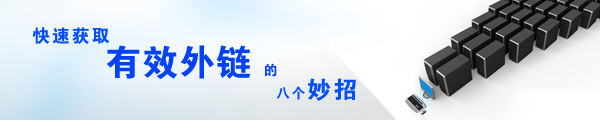
<style>
.page{position:relative;width:600px;height:120px}
.page>*{position:absolute;margin:0}
.t1{font:18px "FZDHTJW--GB1-0";letter-spacing:0.1em;color:#004eff}
.t2{font:36px "FZDHTJW--GB1-0";letter-spacing:0.025em;color:#0042ff}
.t3{font:14px "FZDHTJW--GB1-0";letter-spacing:0.025em;color:#0042ff}
.t4{font:14px "FZDHTJW--GB1-0";letter-spacing:0.1em;color:#004eff}
.t5{font:24px "FZDHTJW--GB1-0";letter-spacing:0.1em;color:#004eff}
</style>
<div class="page">
<p class="t1" style="left:32px;top:27px;width:78px;height:17px">快速获取</p>
<p class="t2" style="left:106px;top:45px;width:171px;height:34px">有效外链 <span class="t3">的</span></p>
<p class="t4" style="left:276px;top:78px;width:80px;height:23px">八个<span class="t5">妙招</span></p>
</div>
